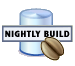
<style>
.page{position:relative;width:75px;height:66px;background:#ffffff}
.page>*{position:absolute;margin:0}
.t1{font:9px "Humanist521BT-XtraBoldCondensed";letter-spacing:0.05em;color:#000000;font-variant:small-caps}
</style>
<div class="page">
<p class="t1" style="left:5px;top:30px;width:65px;height:7px">NIGHTLY BUILD</p>
</div>
